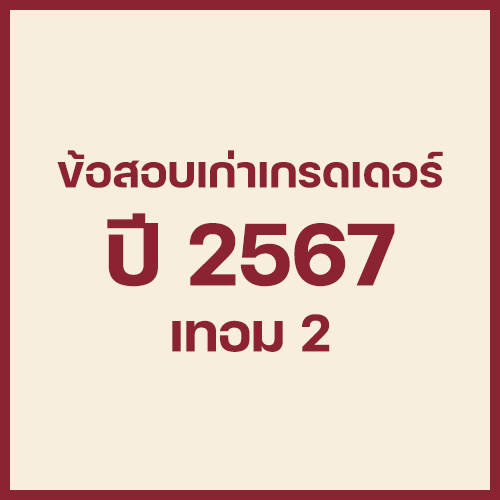
<style>
.page{position:relative;width:500px;height:500px;background:#f8eedf}
.page>*{position:absolute;margin:0}
.t1{font:60px "FCMinimalBold";color:#8b2332}
.t2{font:120px "FCMinimalBold";color:#8b2332}
.t3{font:72px "FCMinimalBold";color:#8b2332}
</style>
<div class="page">
<p class="t1" style="left:57px;top:150px;width:386px;height:38px">ข้อสอบเก่าเกรดเดอร์</p>
<p class="t2" style="left:107px;top:213px;width:288px;height:74px">ปี 2567</p>
<p class="t3" style="left:172px;top:314px;width:158px;height:38px">เทอม 2</p>
</div>
